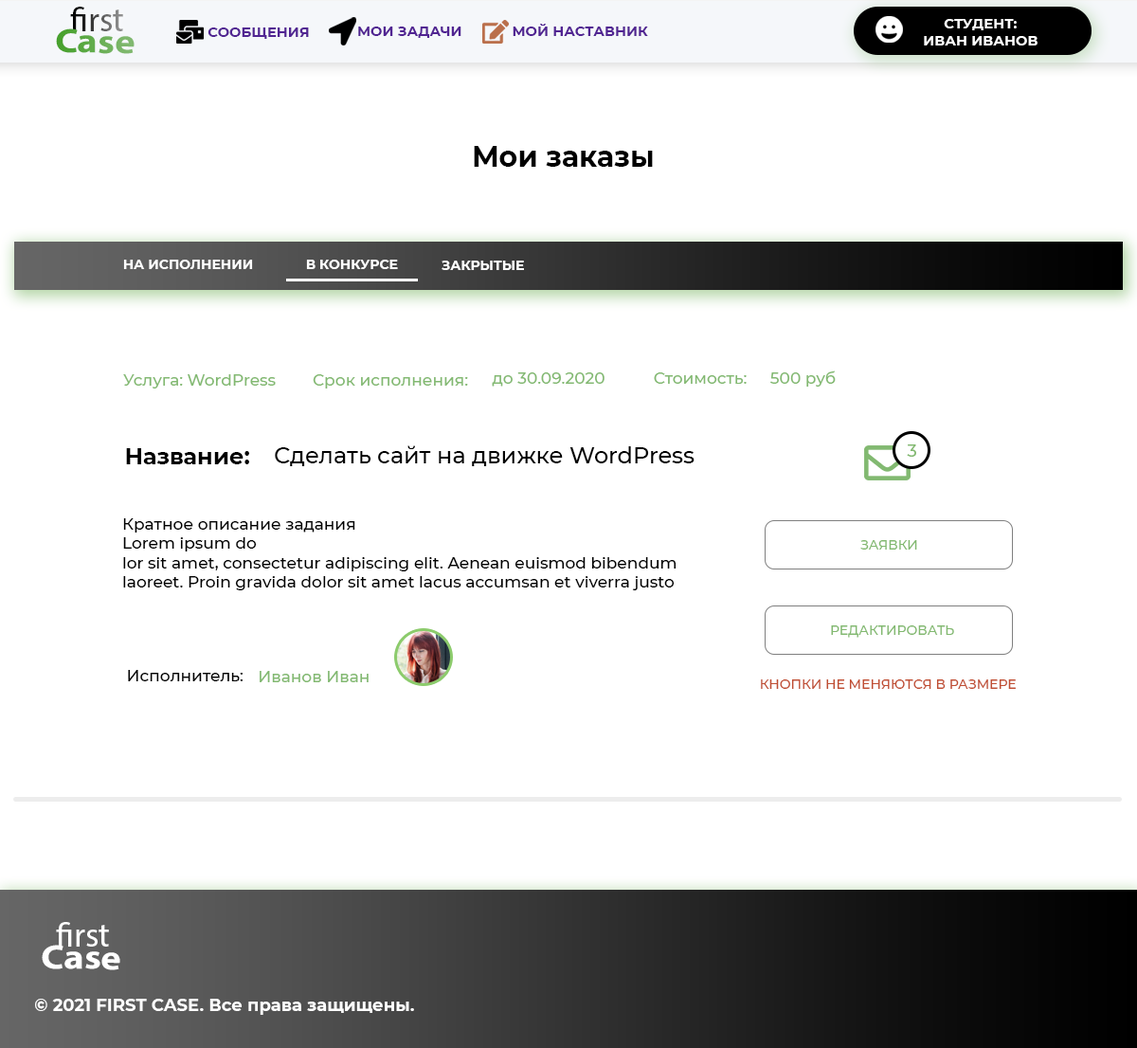
<style>
.page{position:relative;width:1137px;height:1048px;background:#ffffff}
.page>*{position:absolute;margin:0}
.t1{font:34.1px "MyriadPro-Regular"}
.t2{font:34.1px "MyriadPro-Bold";scale:1.13 1}
.t3{font:34.4px "MyriadPro-Regular";scale:1.13 1}
.t4{font:14px "Montserrat-Bold";color:#512592;text-transform:uppercase}
.t5{font:14px "Montserrat-Bold";color:#512492;text-transform:uppercase}
.t6{font:14px "Montserrat-Bold";color:#ffffff;text-transform:uppercase}
.t7{font:28.4px "Montserrat-Bold";color:#000000}
.t8{font:13.3px "Montserrat-Bold";color:#ffffff;text-transform:uppercase}
.t9{font:16.1px "Montserrat-Medium";color:#82b971}
.t10{font:22.7px "Montserrat-Bold";color:#000000}
.t11{font:22.7px "Montserrat-Medium";color:#000000}
.t12{font:17.1px "Montserrat-Medium";color:#82b970}
.t13{font:16.1px "Montserrat-Medium";color:#000000}
.t14{font:13.3px "Montserrat-Medium";color:#82b970;text-transform:uppercase}
.t15{font:13.3px "Montserrat-Medium";color:#bf4e34;text-transform:uppercase}
.t16{font:34.1px "MyriadPro-Regular";color:#ffffff}
.t17{font:34.1px "MyriadPro-Bold";color:#ffffff;scale:1.13 1}
.t18{font:34.1px "MyriadPro-Regular";color:#ffffff;scale:1.13 1}
.t19{font:17.1px "Montserrat-Bold";color:#ffffff}
</style>
<div class="page">
<p class="t1" style="left:70px;top:7px;width:53px;height:24px">first</p>
<p class="t2" style="left:56px;top:28px;width:79px;height:26px;rotate:1deg"><span class="t3">       </span>Case</p>
<p class="t4" style="left:208px;top:27px;width:101px;height:12px">СООБЩЕНИЯ</p>
<p class="t5" style="left:358px;top:27px;width:104px;height:11px">МОИ задачи</p>
<p class="t5" style="left:513px;top:24px;width:135px;height:12px">мой наставник</p>
<p class="t6" style="left:924px;top:19px;width:114px;height:26px;text-align:center">студент:<br>иВАН иВАНОВ</p>
<p class="t7" style="left:474px;top:146px;width:179px;height:21px">Мои заказы</p>
<p class="t8" style="left:123px;top:260px;width:130px;height:9px">На исполнении</p>
<p class="t8" style="left:306px;top:260px;width:92px;height:9px">В конкурсе</p>
<p class="t8" style="left:442px;top:261px;width:82px;height:9px">Закрытые</p>
<p class="t9" style="left:123px;top:374px;width:153px;height:15px">Услуга: WordPress</p>
<p class="t9" style="left:313px;top:374px;width:155px;height:15px">Срок исполнения:</p>
<p class="t9" style="left:492px;top:373px;width:113px;height:14px">до 30.09.2020</p>
<p class="t9" style="left:654px;top:373px;width:93px;height:11px">Стоимость:</p>
<p class="t9" style="left:771px;top:371px;width:65px;height:16px">500 руб</p>
<p class="t10" style="left:126px;top:448px;width:123px;height:16px">Название:</p>
<p class="t11" style="left:275px;top:445px;width:420px;height:21px">Сделать сайт на движке WordPress</p>
<p class="t12" style="left:907px;top:445px;width:10px;height:12px">3</p>
<p class="t13" style="left:123px;top:518px;width:554px;height:73px">Кратное описание задания<br>Lorem ipsum do<br>lor sit amet, consectetur adipiscing elit. Aenean euismod bibendum laoreet. Proin gravida dolor sit amet lacus accumsan et viverra justo commodo.</p>
<p class="t14" style="left:861px;top:540px;width:57px;height:10px">заявки</p>
<p class="t14" style="left:831px;top:626px;width:124px;height:12px">редактировать</p>
<p class="t13" style="left:128px;top:670px;width:116px;height:12px">Исполнитель:</p>
<p class="t9" style="left:260px;top:671px;width:109px;height:11px">Иванов Иван</p>
<p class="t15" style="left:761px;top:680px;width:255px;height:9px">кнопки не меняются в размере</p>
<p class="t16" style="left:56px;top:922px;width:53px;height:25px">first</p>
<p class="t17" style="left:42px;top:945px;width:78px;height:26px;rotate:1deg"><span class="t18">       </span>Case</p>
<p class="t19" style="left:35px;top:999px;width:379px;height:16px">© 2021 FIRST CASE. Все права защищены.</p>
</div>
